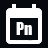
<style>
.page{position:relative;width:48px;height:48px;background:#06090d}
.page>*{position:absolute;margin:0}
.t1{font:16.1px "Impact";color:#ffffff}
</style>
<div class="page">
<p class="t1" style="left:16px;top:22px;width:16px;height:13px">Pn</p>
</div>
